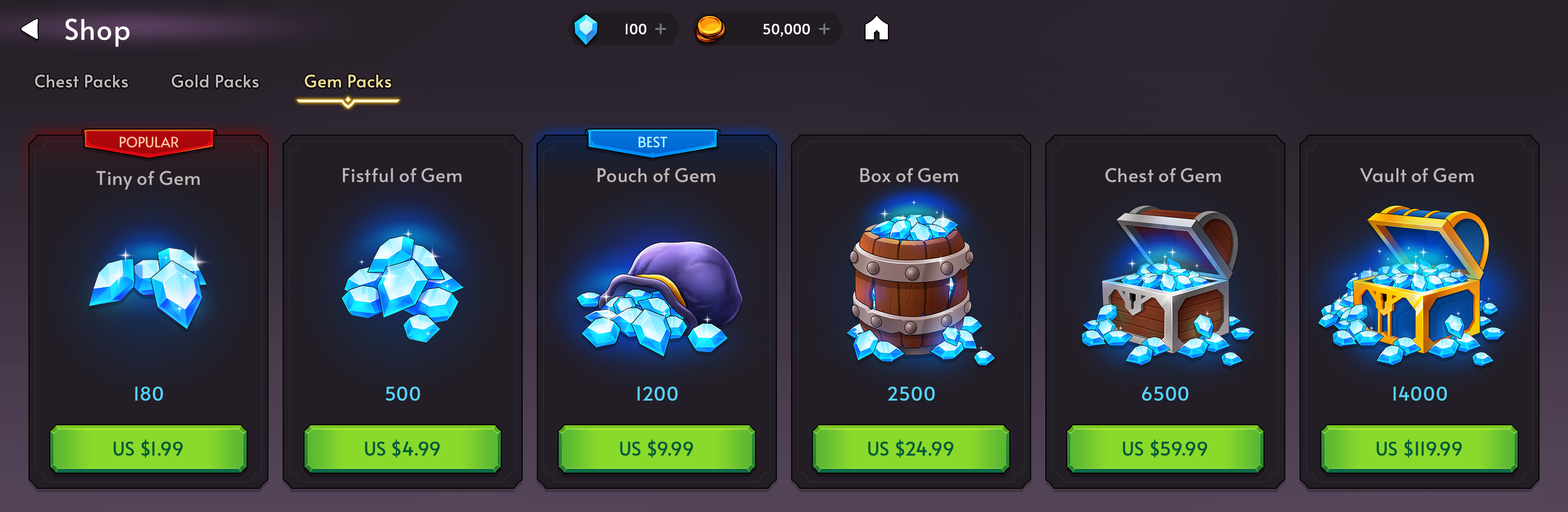
<style>
.page{position:relative;width:1568px;height:512px}
.page>*{position:absolute;margin:0}
.t1{font:28.5px "Alata-Regular";color:#ffffff}
.t2{font:13.7px "Alata-Regular";letter-spacing:-0.025em;color:#ffffff;font-weight:bold}
.t3{font:17.1px "Alata-Regular";color:#beb5b6;font-weight:bold}
.t4{font:17.1px "Alata-Regular";color:#ecd895;font-weight:bold}
.t5{font:14.2px "Alata-Regular";color:#ffc69c;text-transform:uppercase}
.t6{font:14.2px "Alata-Regular";color:#b6f5ff;text-transform:uppercase}
.t7{font:19px "Alata-Regular";letter-spacing:-0.01em;color:#beb5b6}
.t8{font:19px "Alata-Regular";letter-spacing:-0.01em;color:#55d2fe}
.t9{font:19px "Alata-Regular";color:#045a39}
</style>
<div class="page">
<p class="t1" style="left:65px;top:18px;width:64px;height:29px">Shop</p>
<p class="t2" style="left:626px;top:23px;width:20px;height:12px">100</p>
<p class="t2" style="left:763px;top:24px;width:47px;height:13px">50,000</p>
<p class="t3" style="left:35px;top:74px;width:93px;height:14px">Chest Packs</p>
<p class="t3" style="left:172px;top:74px;width:87px;height:14px">Gold Packs</p>
<p class="t4" style="left:304px;top:74px;width:87px;height:14px">Gem Packs</p>
<p class="t5" style="left:120px;top:137px;width:59px;height:11px">popular</p>
<p class="t6" style="left:638px;top:137px;width:29px;height:11px">Best</p>
<p class="t7" style="left:96px;top:171px;width:104px;height:19px">Tiny of Gem</p>
<p class="t7" style="left:343px;top:168px;width:118px;height:15px">Fistful of Gem</p>
<p class="t7" style="left:598px;top:168px;width:117px;height:15px">Pouch of Gem</p>
<p class="t7" style="left:860px;top:168px;width:98px;height:15px">Box of Gem</p>
<p class="t7" style="left:1105px;top:168px;width:116px;height:15px">Chest of Gem</p>
<p class="t7" style="left:1360px;top:168px;width:114px;height:15px">Vault of Gem</p>
<p class="t8" style="left:135px;top:387px;width:28px;height:14px">180</p>
<p class="t8" style="left:386px;top:387px;width:34px;height:14px">500</p>
<p class="t8" style="left:637px;top:387px;width:41px;height:14px">1200</p>
<p class="t8" style="left:887px;top:387px;width:48px;height:14px">2500</p>
<p class="t8" style="left:1142px;top:387px;width:47px;height:14px">6500</p>
<p class="t8" style="left:1393px;top:386px;width:54px;height:15px">14000</p>
<p class="t9" style="left:113px;top:440px;width:70px;height:18px">US $1.99</p>
<p class="t9" style="left:365px;top:440px;width:75px;height:18px">US $4.99</p>
<p class="t9" style="left:620px;top:440px;width:73px;height:18px">US $9.99</p>
<p class="t9" style="left:868px;top:440px;width:86px;height:18px">US $24.99</p>
<p class="t9" style="left:1123px;top:440px;width:85px;height:18px">US $59.99</p>
<p class="t9" style="left:1376px;top:440px;width:86px;height:18px">US $119.99</p>
</div>
